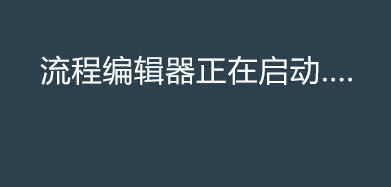
<style>
.page{position:relative;width:391px;height:187px;background:#2b414f}
.page>*{position:absolute;margin:0}
.t1{font:30px "MicrosoftYaHei";letter-spacing:0.04em;color:#ffffff}
</style>
<div class="page">
<p class="t1" style="left:40px;top:55px;width:312px;height:30px">流程编辑器正在启动....</p>
</div>
